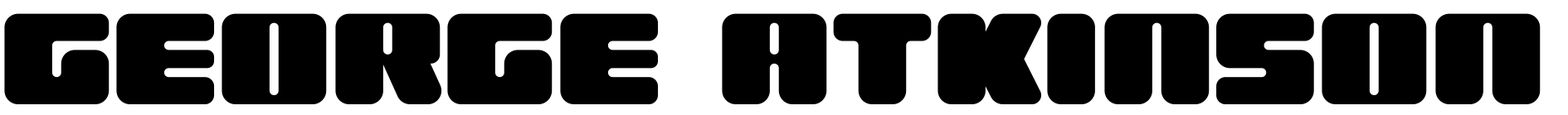
<style>
.page{position:relative;width:1568px;height:115px;background:#000000}
.page>*{position:absolute;margin:0}
.t1{font:141.7px "Rahovets";color:#000000}
</style>
<div class="page">
<p class="t1" style="left:4px;top:13px;width:1537px;height:92px">GEORGE ATKINSON</p>
</div>
